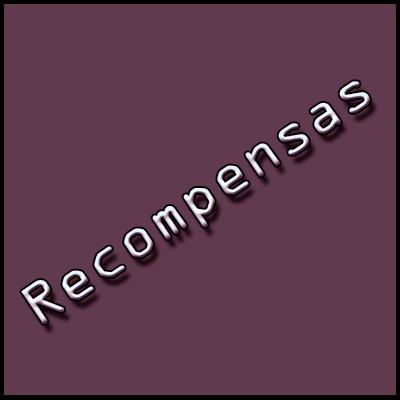
<style>
.page{position:relative;width:400px;height:400px;background:#603b4e}
.page>*{position:absolute;margin:0}
.t1{font:51.8px "OCRAStd"}
</style>
<div class="page">
<p class="t1" style="left:21px;top:81px;width:349px;height:243px;rotate:-34deg">Recompensas</p>
</div>
